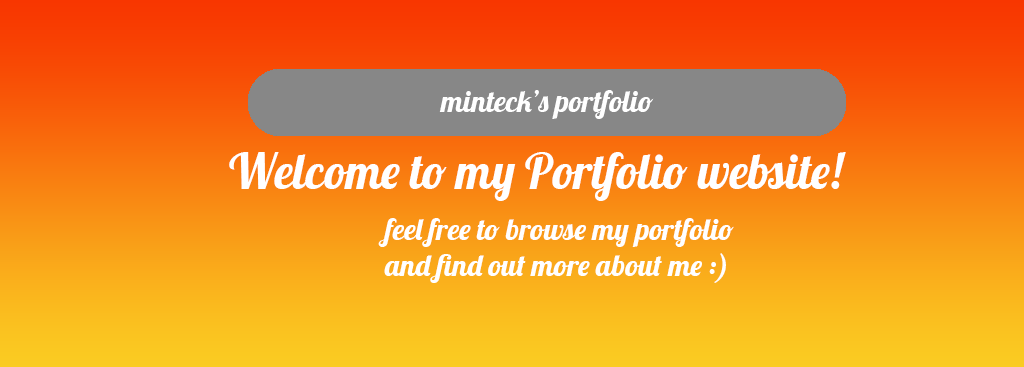
<style>
.page{position:relative;width:1024px;height:367px}
.page>*{position:absolute;margin:0}
.t1{font:30px "Lobster-Regular";color:#ffffff}
.t2{font:48px "Lobster-Regular";color:#ffffff}
</style>
<div class="page">
<p class="t1" style="left:439px;top:90px;width:215px;height:29px">minteck’s portfolio</p>
<p class="t2" style="left:229px;top:152px;width:617px;height:49px">Welcome to my Portfolio website!</p>
<p class="t1" style="left:378px;top:218px;width:356px;height:65px">feel free to browse my portfolio <br>and find out more about me :)</p>
</div>
